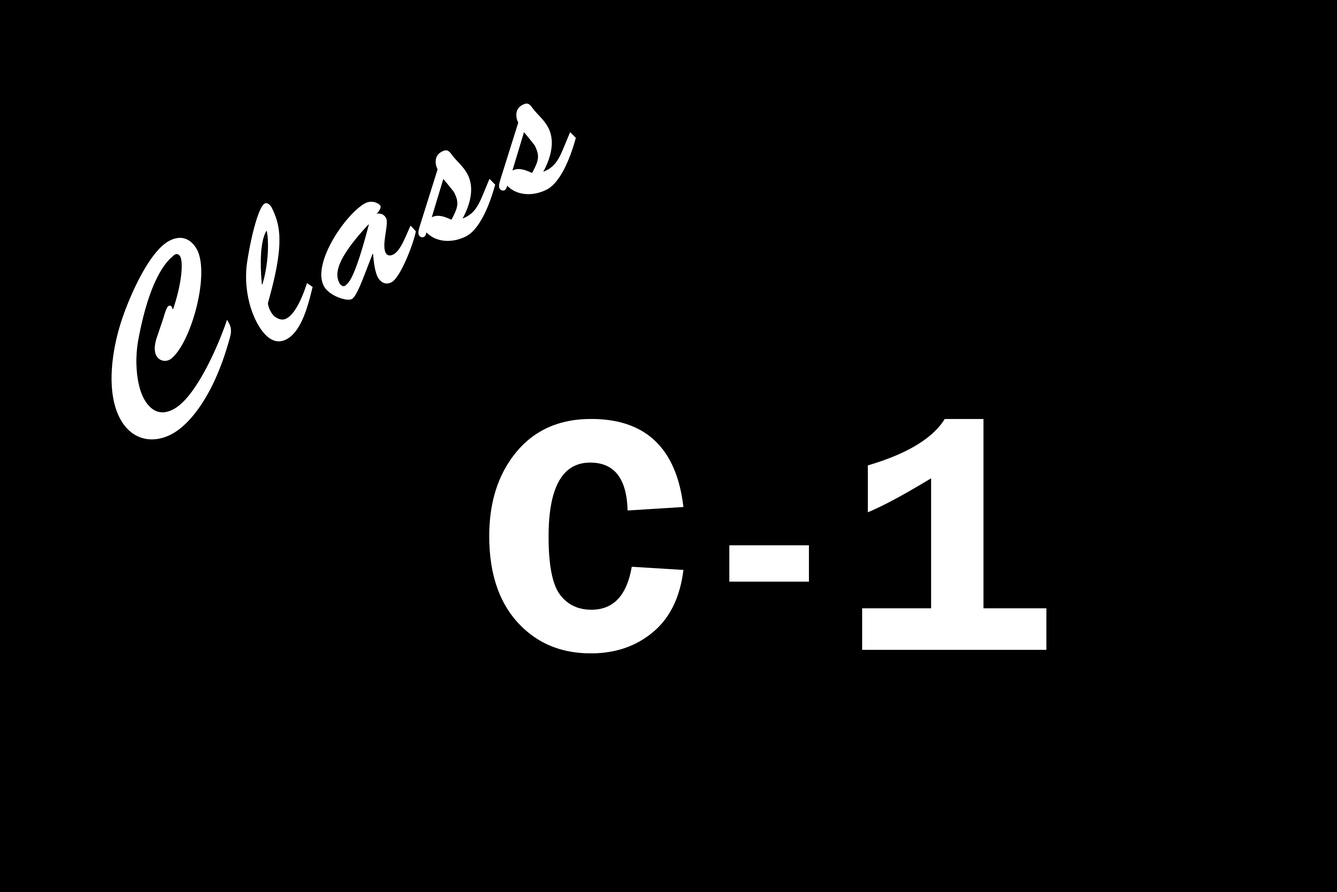
<style>
.page{position:relative;width:1337px;height:892px;background:#000000}
.page>*{position:absolute;margin:0}
.t1{font:203.7px "BrushScriptStd";letter-spacing:0.1em;color:#ffffff}
.t2{font:341.1px "FranklinGothic-Demi";letter-spacing:0.1em;color:#ffffff}
</style>
<div class="page">
<p class="t1" style="left:111px;top:103px;width:465px;height:336px;rotate:-30deg">Class</p>
<p class="t2" style="left:489px;top:419px;width:558px;height:234px">C-1</p>
</div>
